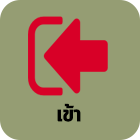
<style>
.page{position:relative;width:140px;height:140px;background:#959d73}
.page>*{position:absolute;margin:0}
.t1{font:24px "Cloud-Bold";letter-spacing:-0.025em;color:#000000}
</style>
<div class="page">
<p class="t1" style="left:57px;top:103px;width:24px;height:19px">เข้า</p>
</div>
